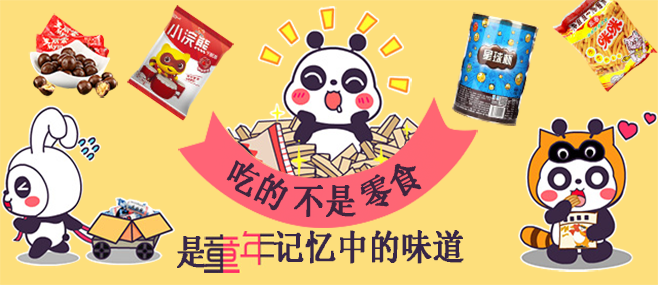
<style>
.page{position:relative;width:658px;height:285px;background:#fddf7c}
.page>*{position:absolute;margin:0}
.t1{font:35.7px "System";color:#3f253e;font-weight:bold;scale:0.89 1}
.t2{font:35.9px "System";color:#3f253e;font-weight:bold;scale:0.88 1}
.t3{font:35.9px "System";color:#372648;font-weight:bold;scale:0.88 1}
</style>
<div class="page">
<p class="t1" style="left:226px;top:160px;width:62px;height:51px;rotate:27deg">吃的</p>
<p class="t1" style="left:360px;top:163px;width:62px;height:44px;rotate:-28deg">零食</p>
<p class="t2" style="left:294px;top:185px;width:62px;height:32px">不是</p>
<p class="t3" style="left:273px;top:230px;width:191px;height:34px">记忆中的味道</p>
<p class="t3" style="left:177px;top:236px;width:30px;height:32px">是</p>
</div>
